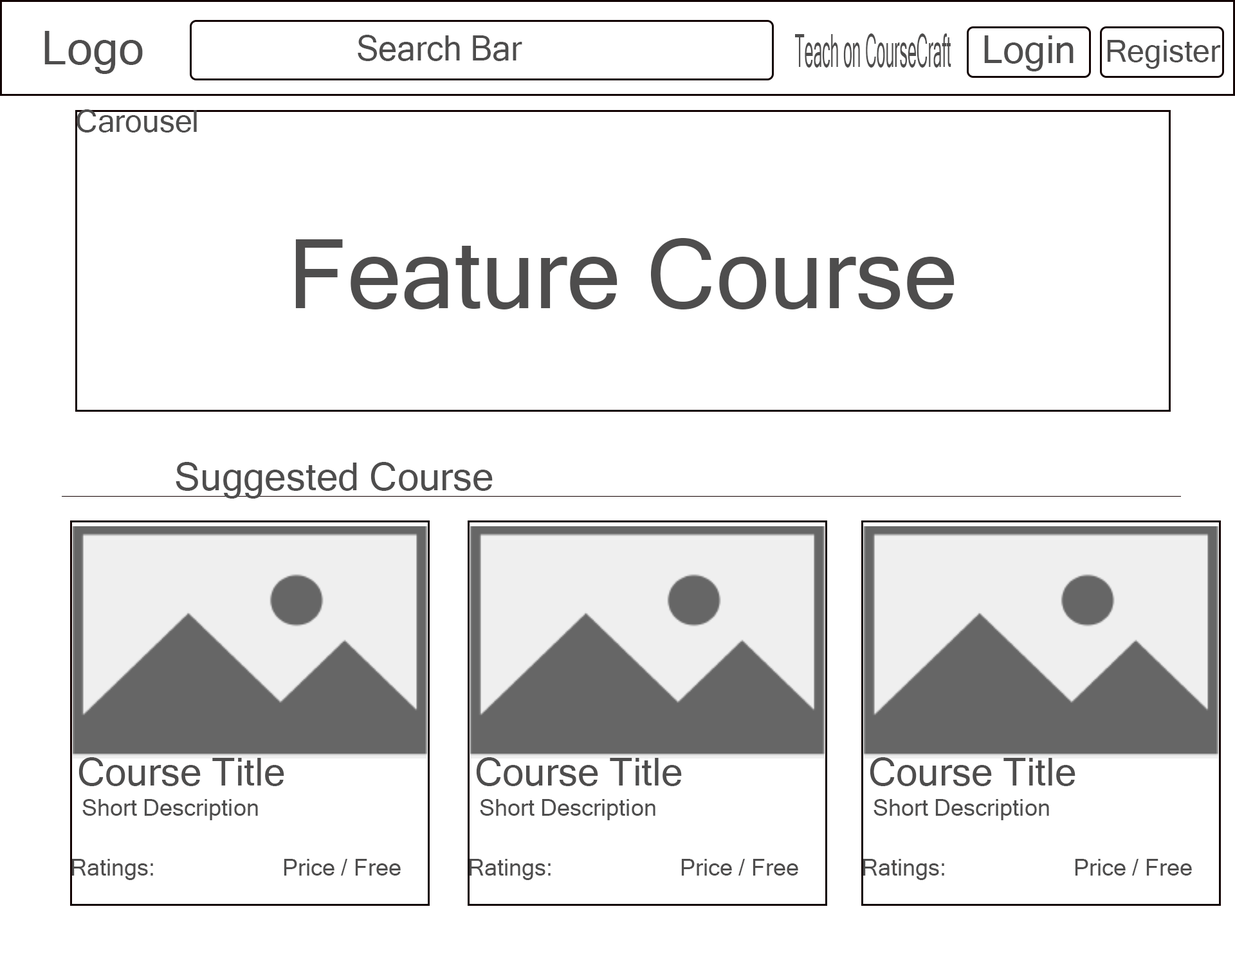
<style>
.page{position:relative;width:1235px;height:965px;background:#ffffff}
.page>*{position:absolute;margin:0}
.t1{font:46.3px "MicrosoftSansSerif";color:#4e4d4d}
.t2{font:34.6px "MicrosoftSansSerif";color:#4e4d4d;scale:0.96 1}
.t3{font:45.5px "MicrosoftSansSerif";color:#4e4d4d;scale:0.35 1}
.t4{font:38.6px "MicrosoftSansSerif";color:#4e4d4d}
.t5{font:30.9px "MicrosoftSansSerif";color:#4e4d4d}
.t6{font:96.5px "MicrosoftSansSerif";color:#4e4d4d}
.t7{font:23.2px "MicrosoftSansSerif";color:#4e4d4d}
</style>
<div class="page">
<p class="t1" style="left:44px;top:31px;width:99px;height:43px">Logo</p>
<p class="t2" style="left:358px;top:35px;width:164px;height:26px">Search Bar</p>
<p class="t3" style="left:795px;top:33px;width:157px;height:35px">Teach on CourseCraft</p>
<p class="t4" style="left:984px;top:35px;width:90px;height:36px">Login</p>
<p class="t5" style="left:1107px;top:40px;width:114px;height:29px">Register</p>
<p class="t5" style="left:77px;top:109px;width:120px;height:24px">Carousel</p>
<p class="t6" style="left:295px;top:238px;width:660px;height:72px">Feature Course</p>
<p class="t4" style="left:176px;top:462px;width:317px;height:37px">Suggested Course</p>
<p class="t4" style="left:79px;top:757px;width:205px;height:29px">Course Title</p>
<p class="t4" style="left:476px;top:757px;width:206px;height:29px">Course Title</p>
<p class="t4" style="left:870px;top:757px;width:206px;height:29px">Course Title</p>
<p class="t7" style="left:82px;top:799px;width:176px;height:21px">Short Description</p>
<p class="t7" style="left:480px;top:799px;width:176px;height:21px">Short Description</p>
<p class="t7" style="left:874px;top:799px;width:175px;height:21px">Short Description</p>
<p class="t7" style="left:71px;top:859px;width:82px;height:21px">Ratings:</p>
<p class="t7" style="left:284px;top:859px;width:117px;height:17px">Price / Free</p>
<p class="t7" style="left:469px;top:859px;width:82px;height:21px">Ratings:</p>
<p class="t7" style="left:681px;top:859px;width:118px;height:17px">Price / Free</p>
<p class="t7" style="left:863px;top:859px;width:82px;height:21px">Ratings:</p>
<p class="t7" style="left:1075px;top:859px;width:117px;height:17px">Price / Free</p>
</div>
